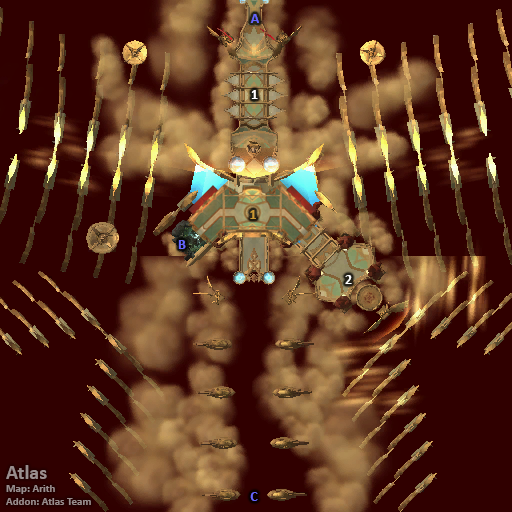
<style>
.page{position:relative;width:512px;height:512px;background:#300000}
.page>*{position:absolute;margin:0}
.t1{font:14px "Calibri-Bold";color:#6666ff}
.t2{font:14px "Calibri-Bold";color:#ffffff}
.t3{font:14px "Calibri-Bold";color:#cc9933}
.t4{font:11px "Calibri-Bold";color:#998d8d}
.t5{font:20px "Calibri-Bold";color:#998d8d}
</style>
<div class="page">
<p class="t1" style="left:250px;top:14px;width:9px;height:9px">A</p>
<p class="t2" style="left:251px;top:90px;width:7px;height:9px">1</p>
<p class="t3" style="left:250px;top:210px;width:6px;height:9px">1</p>
<p class="t1" style="left:178px;top:240px;width:8px;height:9px">B</p>
<p class="t2" style="left:345px;top:275px;width:7px;height:9px">2</p>
<p class="t4" style="left:6px;top:465px;width:85px;height:40px"><span class="t5">Atlas<br></span>Map: Arith<br>Addon: Atlas Team</p>
<p class="t1" style="left:250px;top:492px;width:8px;height:9px">C</p>
</div>
